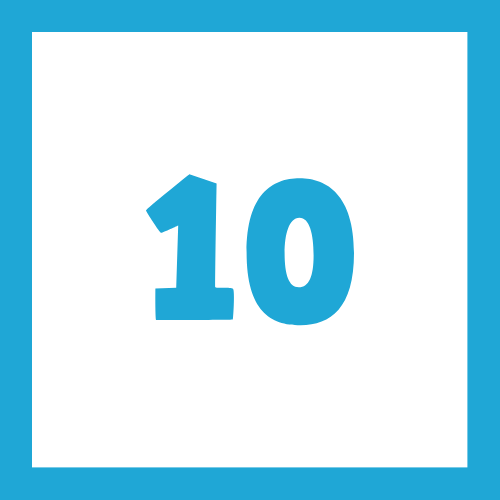
<style>
.page{position:relative;width:500px;height:500px;background:#ffffff}
.page>*{position:absolute;margin:0}
.t1{font:200px "HVDComicSerifPro";color:#1fa7d6}
</style>
<div class="page">
<p class="t1" style="left:145px;top:174px;width:209px;height:152px">10</p>
</div>
